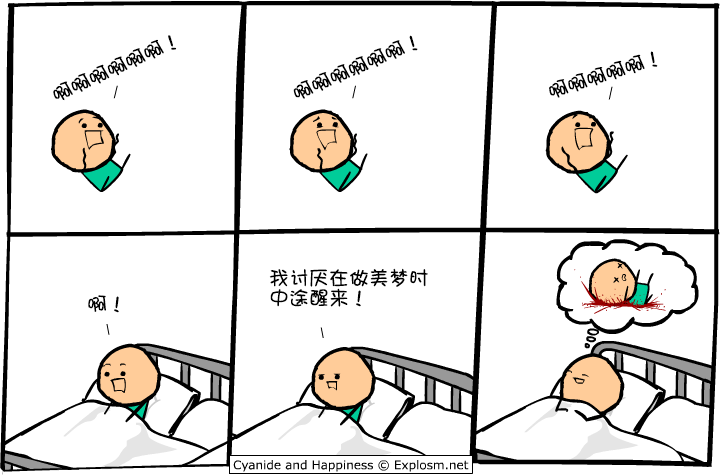
<style>
.page{position:relative;width:720px;height:475px;background:#ffffff}
.page>*{position:absolute;margin:0}
.t1{font:20px "DFGirl";color:#000000}
.t2{font:20.3px "DFGirl";color:#000000}
.t3{font:20px/20px "DFGirl";color:#000000}
</style>
<div class="page">
<p class="t1" style="left:53px;top:35px;width:124px;height:66px;rotate:-25deg">啊啊啊啊啊啊！</p>
<p class="t1" style="left:293px;top:35px;width:125px;height:64px;rotate:-23deg">啊啊啊啊啊啊！</p>
<p class="t2" style="left:549px;top:51px;width:109px;height:47px;rotate:-18deg">啊啊啊啊啊！</p>
<p class="t3" style="left:269px;top:268px;width:159px;height:39px">我讨厌在做美梦时<br>中途醒来！</p>
<p class="t1" style="left:88px;top:295px;width:31px;height:18px">啊！</p>
</div>
